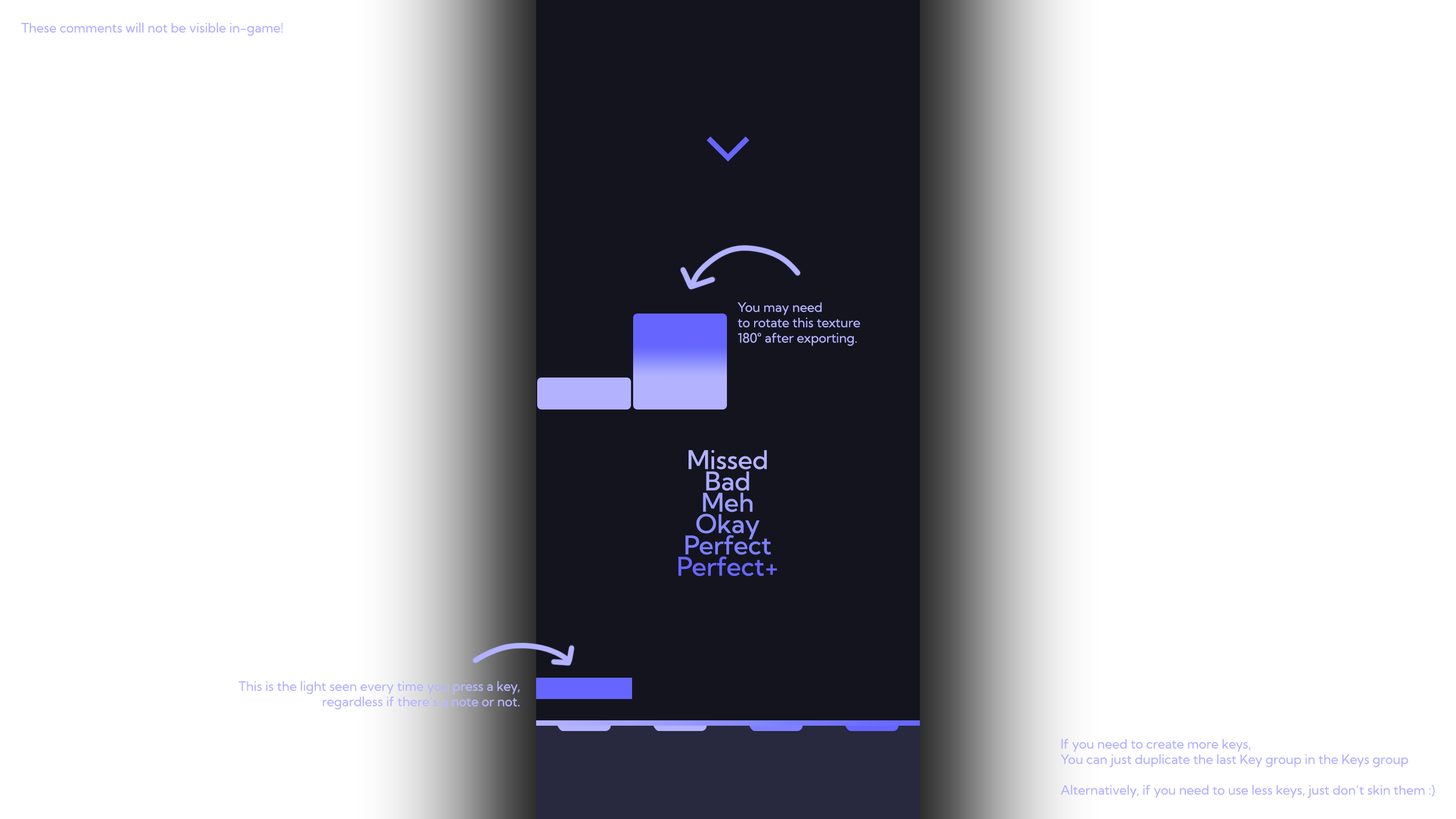
<style>
.page{position:relative;width:1456px;height:819px;background:#ffffff}
.page>*{position:absolute;margin:0}
.t1{font:12.8px "KumbhSans-Regular";color:#b3b2ff}
.t2{font:25.6px "KumbhSans-Medium";color:#b3b2ff}
.t3{font:25.6px "KumbhSans-Medium";color:#a9aaff}
.t4{font:25.6px "KumbhSans-Medium";color:#9a9dff}
.t5{font:25.6px "KumbhSans-Medium";color:#8a8eff}
.t6{font:25.6px "KumbhSans-Medium";color:#7a7eff}
.t7{font:25.6px "KumbhSans-Medium";color:#6666ff}
</style>
<div class="page">
<p class="t1" style="left:21px;top:22px;width:262px;height:14px">These comments will not be visible in-game!</p>
<p class="t1" style="left:738px;top:302px;width:122px;height:44px">You may need<br>to rotate this texture<br>180° after exporting.</p>
<p class="t2" style="left:689px;top:450px;width:78px;height:20px">Missed</p>
<p class="t3" style="left:706px;top:471px;width:43px;height:20px">Bad</p>
<p class="t4" style="left:703px;top:493px;width:50px;height:19px">Meh</p>
<p class="t5" style="left:696px;top:513px;width:64px;height:26px">Okay</p>
<p class="t6" style="left:686px;top:535px;width:85px;height:20px">Perfect</p>
<p class="t7" style="left:679px;top:556px;width:98px;height:20px">Perfect+</p>
<p class="t1" style="left:1061px;top:738px;width:374px;height:60px">If you need to create more keys,<br>You can just duplicate the last Key group in the Keys group<br><br>Alternatively, if you need to use less keys, just don’t skin them :)</p>
</div>
